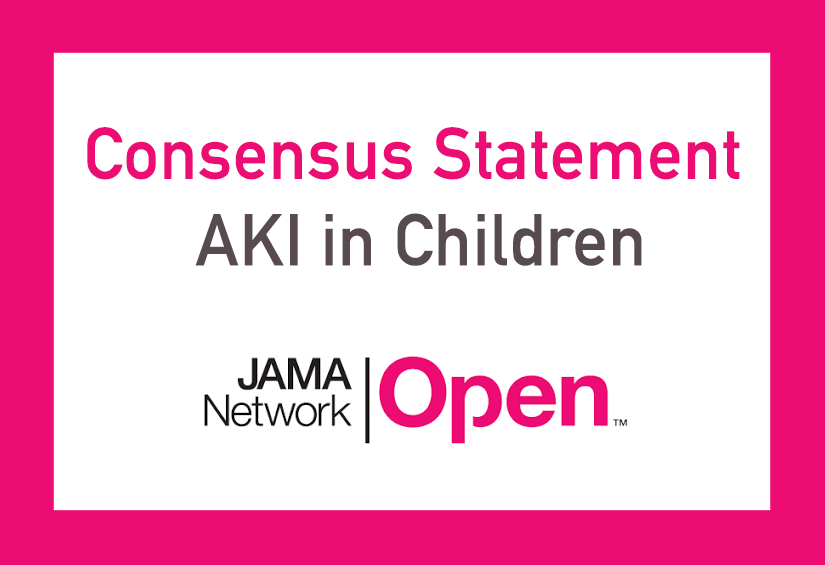
<style>
.page{position:relative;width:825px;height:565px;background:#ffffff}
.page>*{position:absolute;margin:0}
.t1{font:72px "DINAlternate-Bold";color:#ec0c73}
.t2{font:72px "DINAlternate-Bold";color:#574b51}
</style>
<div class="page">
<p class="t1" style="left:87px;top:127px;width:653px;height:139px;text-align:center">Consensus Statement<span class="t2"> <br>AKI in Children</span></p>
</div>
